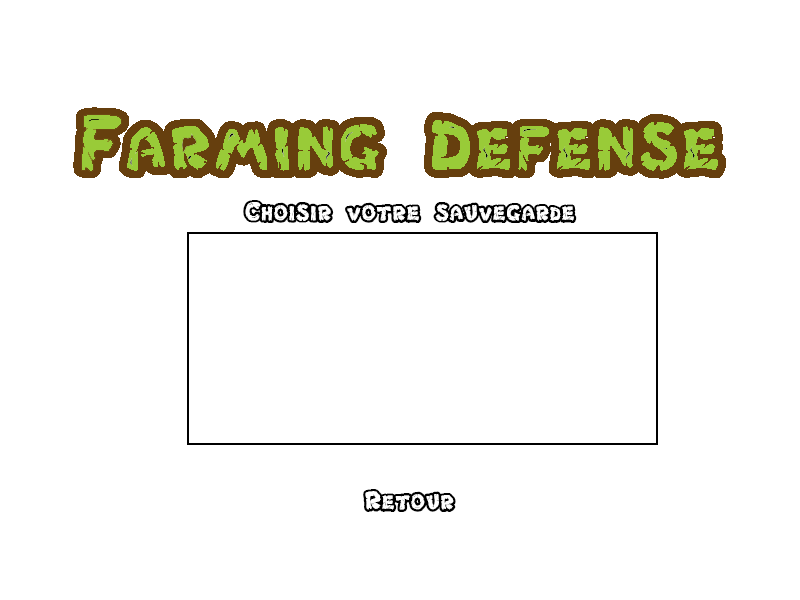
<style>
.page{position:relative;width:800px;height:600px;background:#ffffff}
.page>*{position:absolute;margin:0}
.t1{font:30px "Chlorinar";color:#000000}
</style>
<div class="page">
<p class="t1" style="left:243px;top:200px;width:334px;height:23px">Choisir votre sauvegarde</p>
<p class="t1" style="left:363px;top:489px;width:93px;height:23px">Retour</p>
</div>
